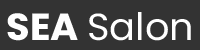
<style>
.page{position:relative;width:200px;height:50px;background:#333333}
.page>*{position:absolute;margin:0}
.t1{font:9px "Poppins-Regular";color:#ffffff}
.t2{font:9px "Poppins-Bold";color:#ffffff}
</style>
<div class="page">
<p class="t1" style="left:7px;top:12px;width:184px;height:29px"><span class="t2">SEA </span>Salon</p>
</div>
